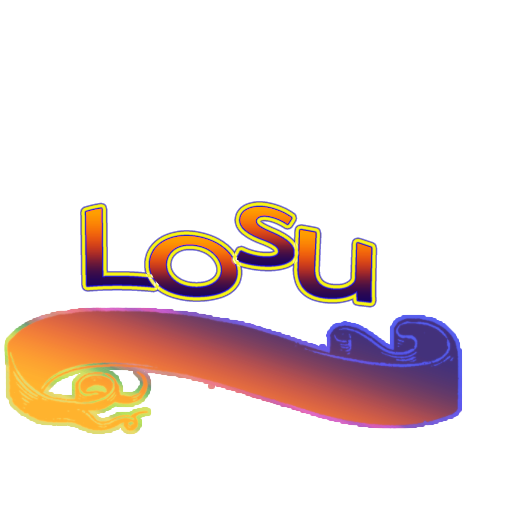
<style>
.page{position:relative;width:512px;height:512px;background:#ffffff}
.page>*{position:absolute;margin:0}
.t1{font:102.5px "MyriadPro-Regular";scale:1.75 1}
</style>
<div class="page">
<p class="t1" style="left:86px;top:208px;width:69px;height:79px">L</p>
<p class="t1" style="left:236px;top:207px;width:58px;height:59px">s</p>
<p class="t1" style="left:150px;top:236px;width:87px;height:60px">o</p>
</div>
